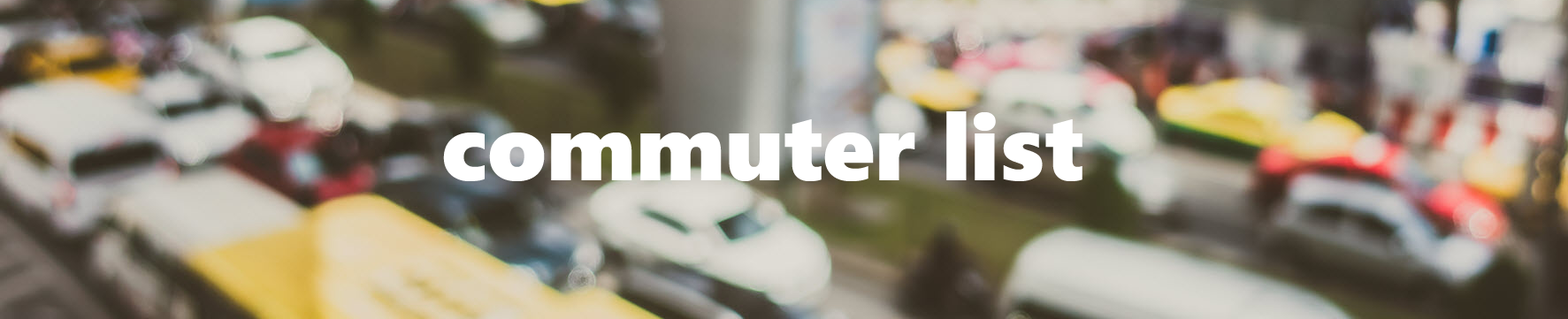
<style>
.page{position:relative;width:1568px;height:319px}
.page>*{position:absolute;margin:0}
.t1{font:93.6px "SegoeUIBlack";color:#ffffff}
</style>
<div class="page">
<p class="t1" style="left:443px;top:111px;width:639px;height:70px">commuter list</p>
</div>
